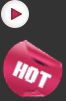
<style>
.page{position:relative;width:66px;height:101px;background:#333333}
.page>*{position:absolute;margin:0}
.t1{font:25.2px "Fixedsys";color:#fffefe;font-weight:bold}
</style>
<div class="page">
<p class="t1" style="left:12px;top:61px;width:39px;height:27px;rotate:24deg">HOT</p>
</div>
